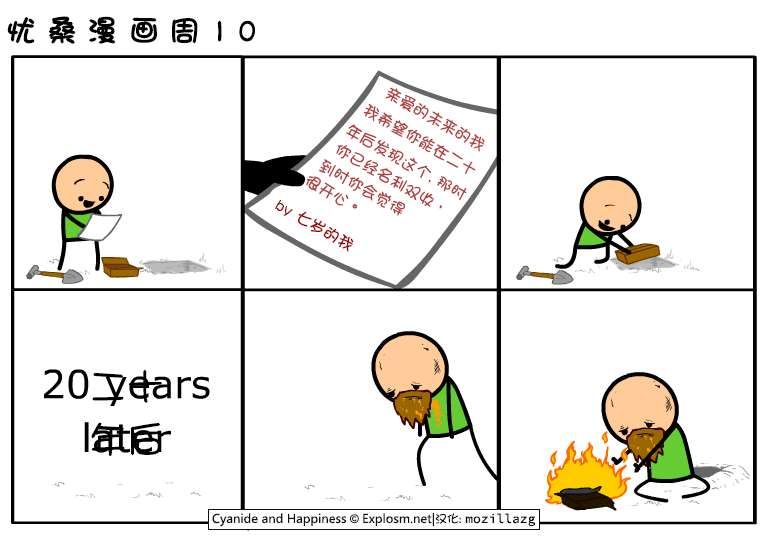
<style>
.page{position:relative;width:780px;height:550px;background:#ffffff}
.page>*{position:absolute;margin:0}
.t1{font:30px "DFGirl";letter-spacing:0.34em;color:#000000;font-weight:bold}
.t2{font:16px/22px "DFGirl";color:#b23f3f}
.t3{font:16px/26px "DFGirl";color:#b23f3f}
.t4{font:16px/20px "DFGirl";color:#b23f3f}
.t5{font:16px "DFGirl";color:#990000}
.t6{font:38px/53px "DFGirl";color:#000000}
</style>
<div class="page">
<p class="t1" style="left:7px;top:16px;width:248px;height:28px">忧桑漫画周10</p>
<p class="t2" style="left:306px;top:87px;width:179px;height:129px;rotate:30deg"><span class="t3">     亲爱的未来的我<br>   我希望你能在二十<br></span>  年后发现这个, 那时<br>  你已经名利双收，<br><span class="t4"> 到时你会觉得<br>很开心。</span></p>
<p class="t5" style="left:275px;top:200px;width:79px;height:52px;rotate:30deg">by 七岁的我</p>
<p class="t6" style="left:91px;top:369px;width:71px;height:88px">二十<br>年后</p>
</div>
